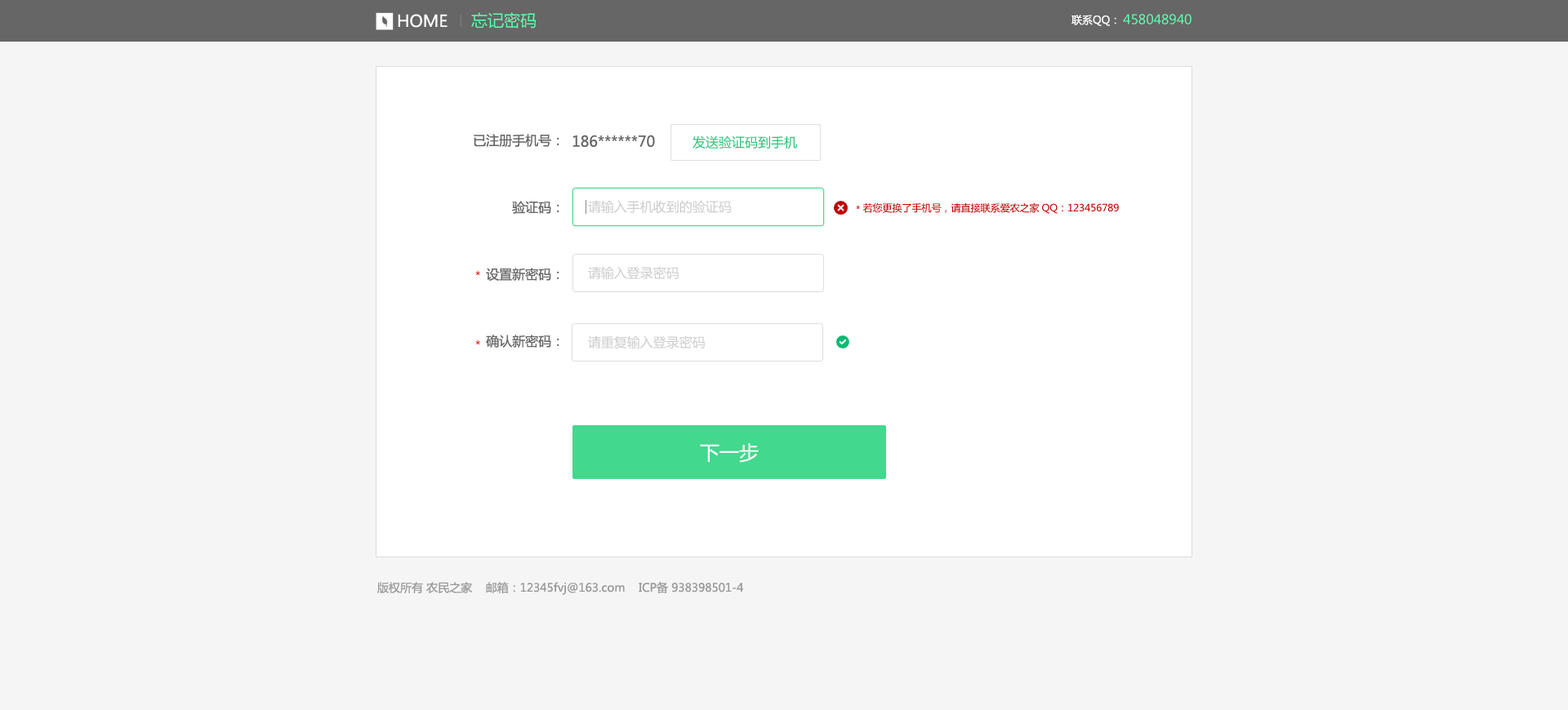
<style>
.page{position:relative;width:1568px;height:710px;background:#f5f5f5}
.page>*{position:absolute;margin:0}
.t1{font:16.3px "MicrosoftYaHei";color:#ffffff;text-transform:uppercase}
.t2{font:16.3px "MicrosoftYaHei";color:#61feaf;text-transform:uppercase}
.t3{font:10.6px "MicrosoftYaHei";color:#ffffff;text-transform:uppercase}
.t4{font:13.1px "MicrosoftYaHei";color:#60fdaf;text-transform:uppercase}
.t5{font:13.1px/67px "MicrosoftYaHei";color:#666666}
.t6{font:14.7px "MicrosoftYaHei";color:#666666}
.t7{font:13.1px "MicrosoftYaHei";color:#2cc378}
.t8{font:13.1px "MicrosoftYaHei";color:#cccccc}
.t9{font:9.8px "MicrosoftYaHei";color:#c00000}
.t10{font:12.2px "MicrosoftYaHei";scale:0.95 1}
.t11{font:19.6px "MicrosoftYaHei";color:#ffffff;text-transform:uppercase}
.t12{font:11.4px "MicrosoftYaHei";color:#999999}
</style>
<div class="page">
<p class="t1" style="left:398px;top:14px;width:50px;height:14px">home</p>
<p class="t2" style="left:471px;top:12px;width:65px;height:17px">忘记密码</p>
<p class="t3" style="left:1071px;top:15px;width:45px;height:11px">联系qq：</p>
<p class="t4" style="left:1123px;top:14px;width:69px;height:10px">458048940</p>
<p class="t5" style="left:474px;top:134px;width:85px;height:214px;text-align:right">已注册手机号：<br>验证码：<br>设置新密码：<br>确认新密码：</p>
<p class="t6" style="left:572px;top:135px;width:83px;height:12px">186******70</p>
<p class="t7" style="left:693px;top:136px;width:104px;height:13px">发送验证码到手机</p>
<p class="t8" style="left:588px;top:200px;width:143px;height:14px">请输入手机收到的验证码</p>
<p class="t9" style="left:856px;top:203px;width:263px;height:11px">*若您更换了手机号，请直接联系爱农之家QQ：123456789</p>
<p class="t8" style="left:588px;top:266px;width:91px;height:14px">请输入登录密码</p>
<p class="t10" style="left:475px;top:270px;width:5px;height:6px">*</p>
<p class="t10" style="left:475px;top:340px;width:5px;height:5px">*</p>
<p class="t8" style="left:588px;top:336px;width:117px;height:14px">请重复输入登录密码</p>
<p class="t11" style="left:700px;top:443px;width:59px;height:20px">下一步</p>
<p class="t12" style="left:377px;top:582px;width:366px;height:13px">版权所有 农民之家    邮箱：12345fvj@163.com    ICP备 938398501-4</p>
</div>
